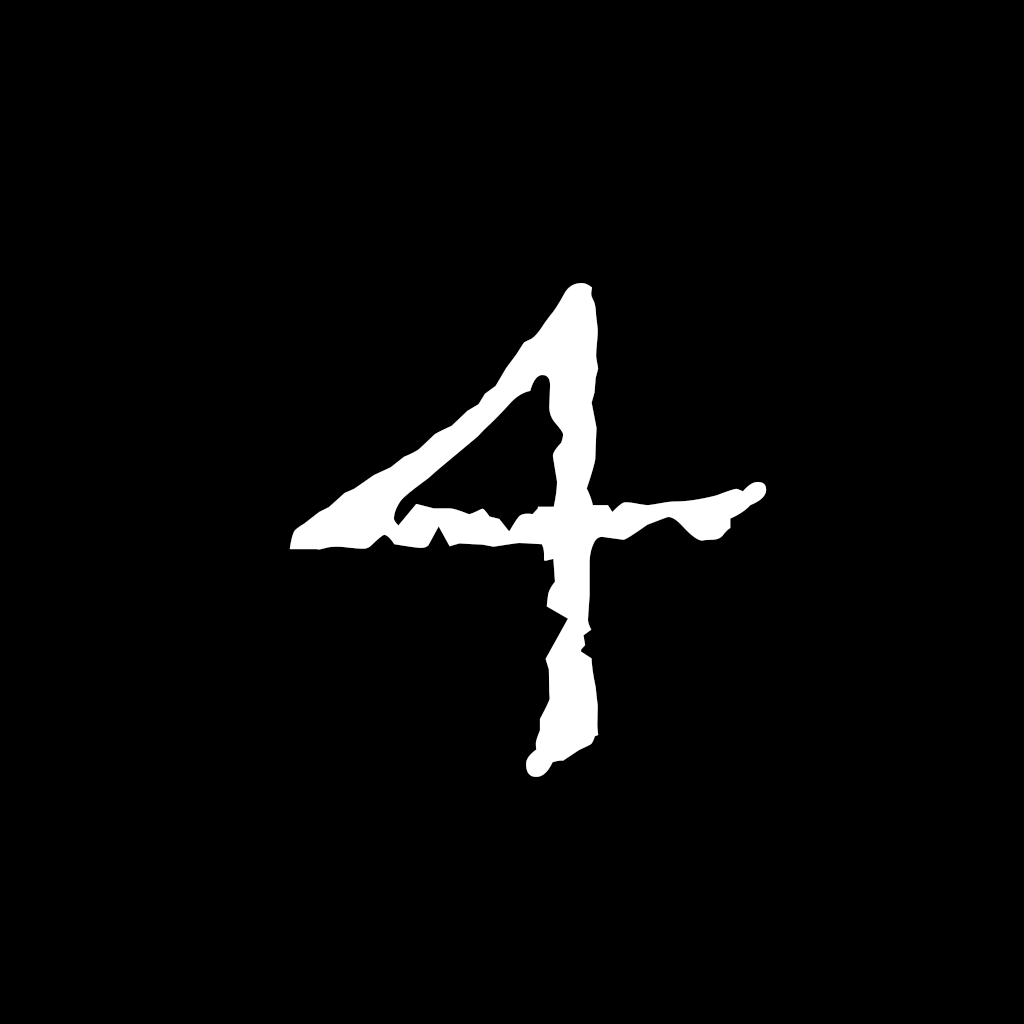
<style>
.page{position:relative;width:1024px;height:1024px;background:#000000}
.page>*{position:absolute;margin:0}
.t1{font:833.3px "Papyrus-Regular";color:#ffffff}
</style>
<div class="page">
<p class="t1" style="left:289px;top:283px;width:478px;height:494px">4</p>
</div>
